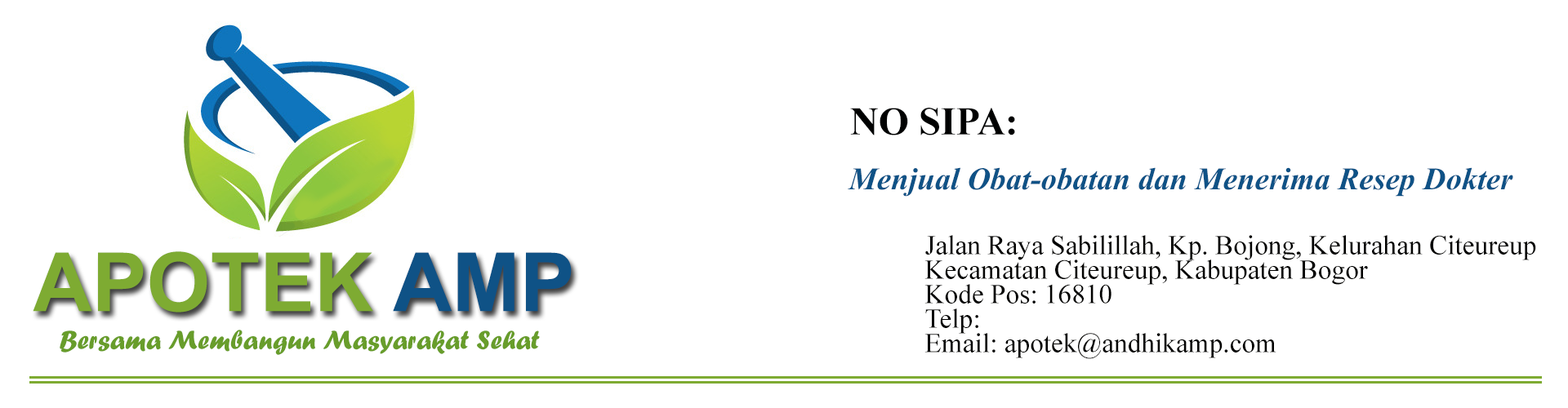
<style>
.page{position:relative;width:1568px;height:408px;background:#ffffff}
.page>*{position:absolute;margin:0}
.t1{font:39.2px "TimesNewRomanPS-BoldMT";color:#000101}
.t2{font:39.2px "Vijaya-Bold";color:#0f5286}
.t3{font:27.2px/24.5px "TimesNewRomanPSMT";color:#010100}
.t4{font:81.7px "Arial-BoldMT";color:#7eab32}
.t5{font:81.7px "Arial-BoldMT";color:#0f5286}
.t6{font:27.2px "ForteMT";color:#689d2b}
</style>
<div class="page">
<p class="t1" style="left:850px;top:108px;width:165px;height:28px">NO SIPA:</p>
<p class="t2" style="left:848px;top:167px;width:665px;height:30px">Menjual Obat-obatan dan Menerima Resep Dokter</p>
<p class="t3" style="left:924px;top:235px;width:612px;height:124px">Jalan Raya Sabilillah, Kp. Bojong, Kelurahan Citeureup<br>Kecamatan Citeureup, Kabupaten Bogor<br>Kode Pos: 16810<br>Telp:<br>Email: apotek@andhikamp.com</p>
<p class="t4" style="left:33px;top:252px;width:539px;height:61px">APOTEK <span class="t5">AMP</span></p>
<p class="t6" style="left:60px;top:330px;width:480px;height:25px">Bersama Membangun Masyarakat Sehat</p>
</div>
